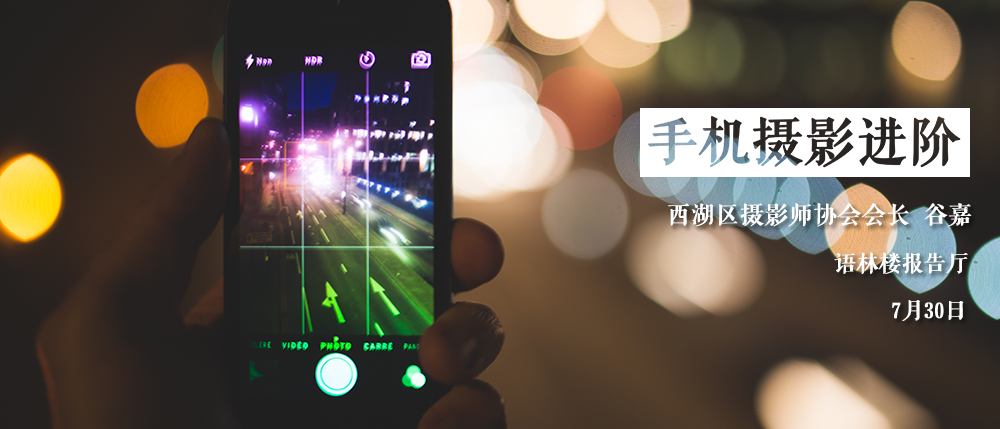
<style>
.page{position:relative;width:1000px;height:429px}
.page>*{position:absolute;margin:0}
.t1{font:23.8px "FZQKBYSJW--GB1-0";color:#ffffff;font-weight:bold}
.t2{font:21.9px "FZQKBYSJW--GB1-0";color:#ffffff;font-weight:bold}
</style>
<div class="page">
<p class="t1" style="left:668px;top:203px;width:304px;height:24px">西湖区摄影师协会会长  谷嘉</p>
<p class="t2" style="left:834px;top:252px;width:134px;height:22px">语林楼报告厅</p>
<p class="t2" style="left:892px;top:300px;width:72px;height:21px">7月30日</p>
</div>
